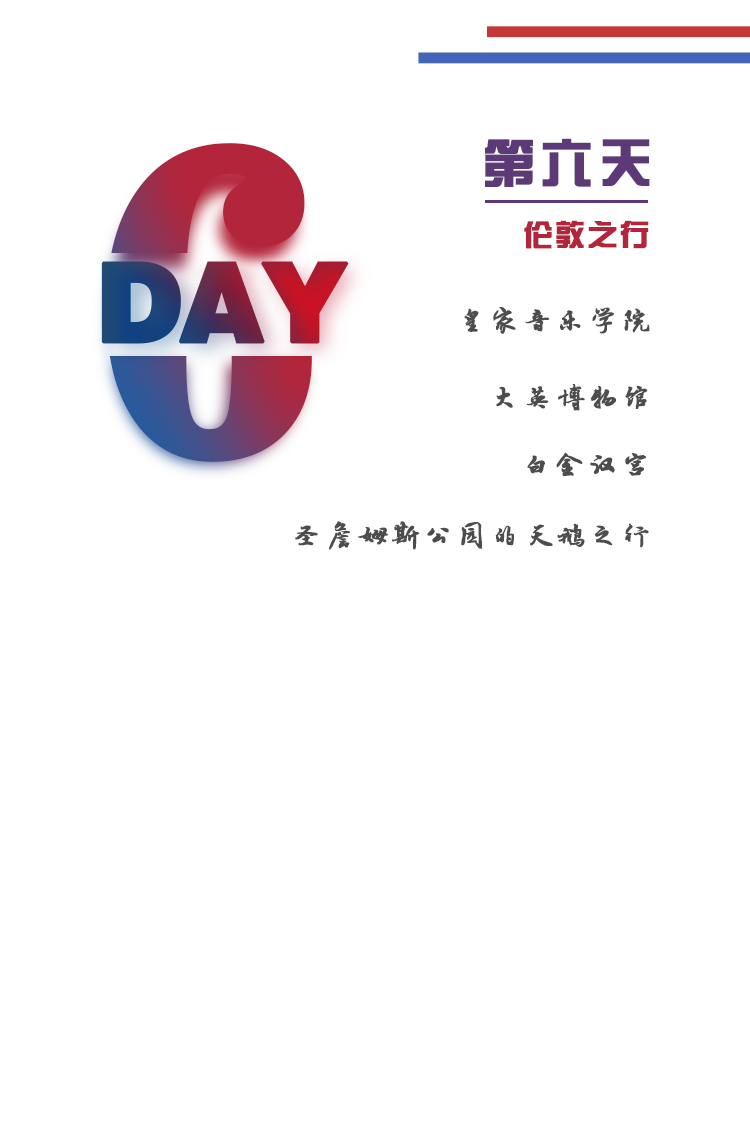
<style>
.page{position:relative;width:750px;height:1140px;background:#ffffff}
.page>*{position:absolute;margin:0}
.t1{font:432.9px "News706BT-BoldC";letter-spacing:-0.05em;font-weight:bold}
.t2{font:52px "FZZYJW--GB1-0";letter-spacing:0.1em;color:#5d3a77;font-weight:bold}
.t3{font:30px "FZZYJW--GB1-0";letter-spacing:0.05em;color:#b3253a;font-weight:bold}
.t4{font:110px "FZCCHJW--GB1-0";letter-spacing:-0.05em;font-weight:bold}
.t5{font:30px "·½ÕýÂÀ½¨µÂ×ÖÌå";letter-spacing:0.075em;color:#4d4d4d;font-weight:bold}
</style>
<div class="page">
<p class="t1" style="left:106px;top:143px;width:206px;height:319px">6</p>
<p class="t2" style="left:485px;top:138px;width:165px;height:49px">第六天</p>
<p class="t3" style="left:524px;top:220px;width:125px;height:29px">伦敦之行</p>
<p class="t4" style="left:101px;top:261px;width:248px;height:83px">DAY</p>
<p class="t5" style="left:464px;top:307px;width:186px;height:27px">皇家音乐学院</p>
<p class="t5" style="left:496px;top:384px;width:152px;height:27px">大英博物馆</p>
<p class="t5" style="left:527px;top:452px;width:119px;height:24px">白金汉宫</p>
<p class="t5" style="left:295px;top:521px;width:354px;height:29px">圣詹姆斯公园的天鹅之行</p>
</div>
